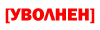
<style>
.page{position:relative;width:100px;height:30px;background:#ffffff}
.page>*{position:absolute;margin:0}
.t1{font:18px "FranklinGothic-Heavy";color:#fb0101}
</style>
<div class="page">
<p class="t1" style="left:5px;top:8px;width:90px;height:16px">[УВОЛНЕН]</p>
</div>
